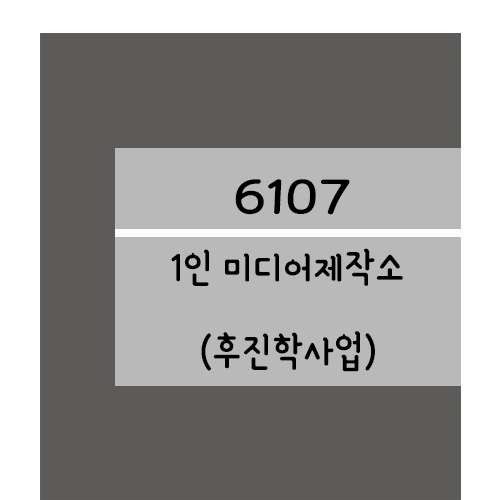
<style>
.page{position:relative;width:500px;height:500px;background:#5d5a5a}
.page>*{position:absolute;margin:0}
.t1{font:61.2px "YanoljaYacheR";color:#000000;scale:1.18 1}
.t2{font:48px "YanoljaYacheR";color:#000000}
</style>
<div class="page">
<p class="t1" style="left:235px;top:179px;width:115px;height:36px">6107</p>
<p class="t2" style="left:171px;top:248px;width:232px;height:124px;text-align:center">1인 미디어제작소<br>(후진학사업)</p>
</div>
